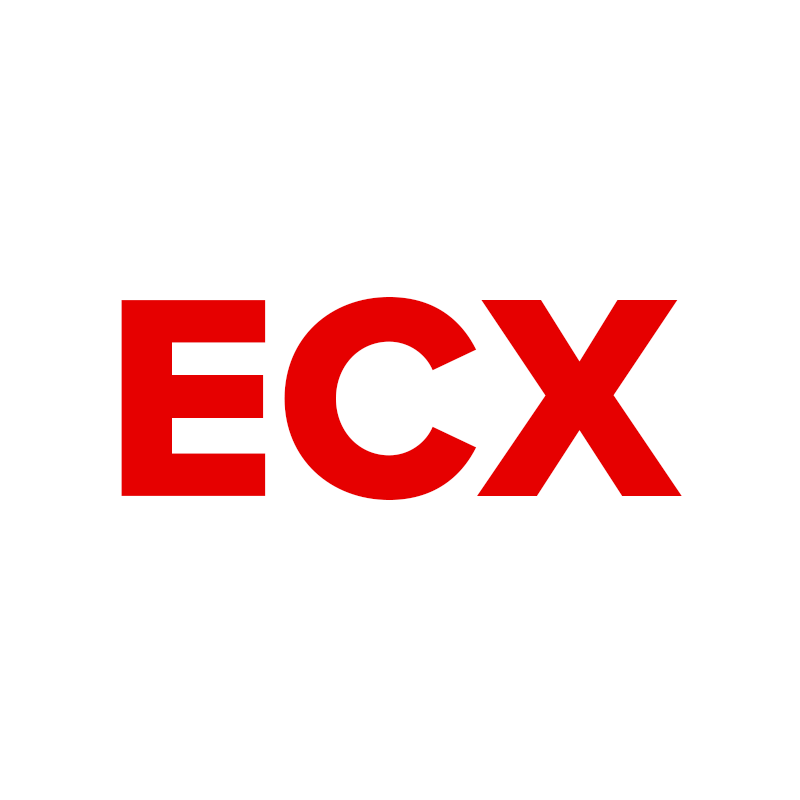
<style>
.page{position:relative;width:800px;height:800px;background:#ffffff}
.page>*{position:absolute;margin:0}
.t1{font:293.9px "ProximaNova-Extrabld";color:#e60000}
</style>
<div class="page">
<p class="t1" style="left:121px;top:296px;width:561px;height:205px">ECX</p>
</div>
